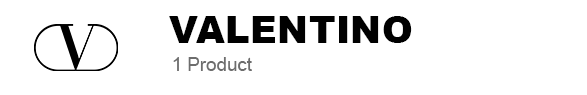
<style>
.page{position:relative;width:587px;height:95px;background:#ffffff}
.page>*{position:absolute;margin:0}
.t1{font:37.5px "Arial-Black";color:#000000}
.t2{font:18.7px "ArialMT";color:#6d6d6d}
</style>
<div class="page">
<p class="t1" style="left:169px;top:16px;width:243px;height:27px">VALENTINO</p>
<p class="t2" style="left:173px;top:57px;width:79px;height:14px">1 Product</p>
</div>
